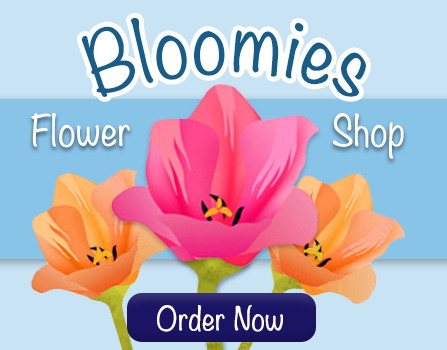
<style>
.page{position:relative;width:447px;height:350px;background:#c7e3f4}
.page>*{position:absolute;margin:0}
.t1{font:75px "Noteworthy-Light";color:#165d8a;font-weight:bold}
.t2{font:37.5px "Noteworthy-Light";color:#ffffff;font-weight:bold}
.t3{font:29.2px "Noteworthy-Light";color:#ffffff;font-weight:bold}
</style>
<div class="page">
<p class="t1" style="left:81px;top:18px;width:285px;height:79px">Bloomies</p>
<p class="t2" style="left:31px;top:113px;width:99px;height:35px">Flower</p>
<p class="t2" style="left:332px;top:113px;width:72px;height:46px">Shop</p>
<p class="t3" style="left:157px;top:305px;width:126px;height:27px">Order Now</p>
</div>
